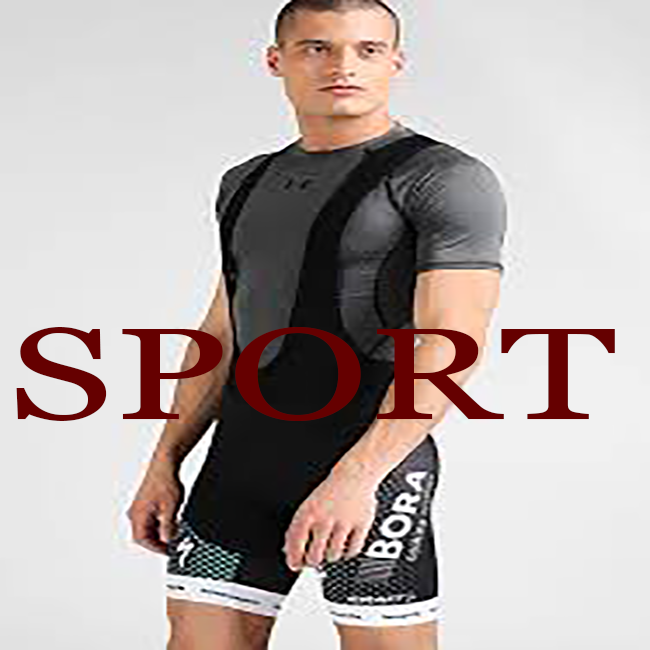
<style>
.page{position:relative;width:650px;height:650px}
.page>*{position:absolute;margin:0}
.t1{font:130px "Georgia";color:#650000;scale:1.44 1}
</style>
<div class="page">
<p class="t1" style="left:16px;top:327px;width:599px;height:94px">SPORT</p>
</div>
